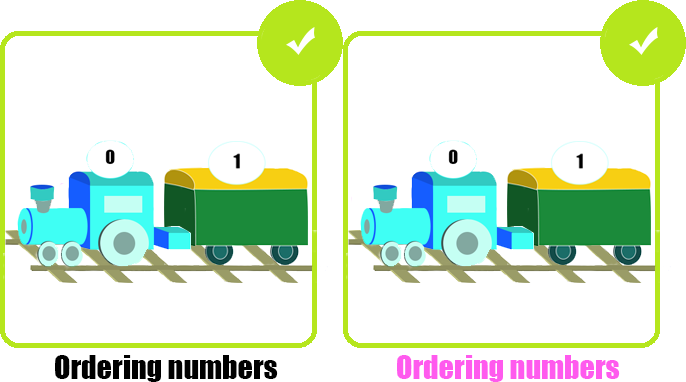
<style>
.page{position:relative;width:686px;height:382px;background:#ffffff}
.page>*{position:absolute;margin:0}
.t1{font:30px "Impact";color:#000000}
.t2{font:30px "Impact";color:#ff5aee}
</style>
<div class="page">
<p class="t1" style="left:55px;top:355px;width:223px;height:27px">Ordering numbers</p>
<p class="t2" style="left:397px;top:355px;width:223px;height:27px">Ordering numbers</p>
</div>
